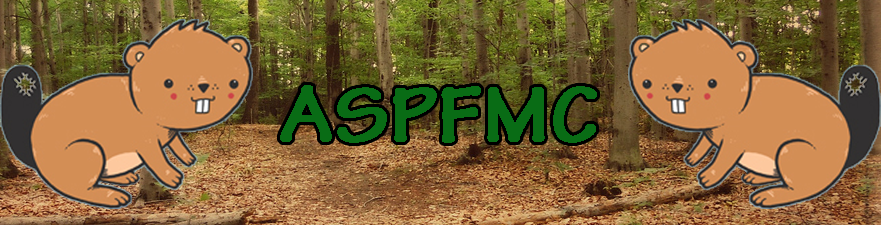
<style>
.page{position:relative;width:881px;height:225px}
.page>*{position:absolute;margin:0}
.t1{font:83.3px "TektonPro-Bold";color:#096c15;font-weight:bold}
</style>
<div class="page">
<p class="t1" style="left:280px;top:85px;width:317px;height:58px">ASPFMC</p>
</div>
